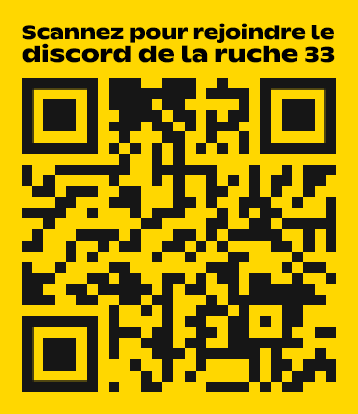
<style>
.page{position:relative;width:358px;height:414px;background:#ffd700}
.page>*{position:absolute;margin:0}
.t1{font:19.2px/41.2px "ABCGintoDiscordNord-Bold";color:#000000}
.t2{font:22.8px/22.8px "ABCGintoDiscordNord-Bold";color:#000000}
</style>
<div class="page">
<p class="t1" style="left:22px;top:23px;width:313px;height:40px">Scannez pour rejoindre le <br><span class="t2">discord de la ruche 33</span></p>
</div>
